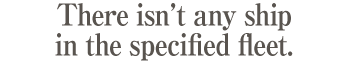
<style>
.page{position:relative;width:348px;height:63px;background:#ffffff}
.page>*{position:absolute;margin:0}
.t1{font:30px/30px "RyuminPro-ExBold";letter-spacing:-0.04em;color:#59544f;scale:0.9 1}
</style>
<div class="page">
<p class="t1" style="left:55px;top:3px;width:238px;height:58px;text-align:center">There isn’t any ship<br>in the specified fleet.</p>
</div>
